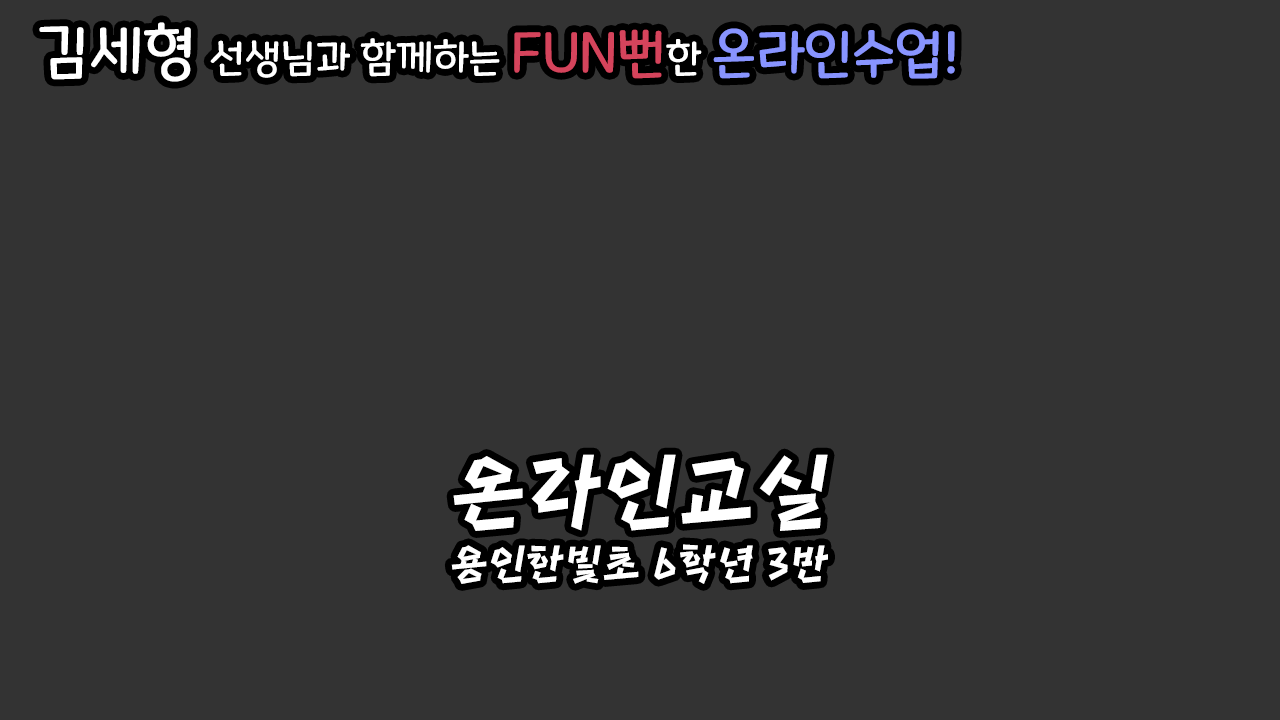
<style>
.page{position:relative;width:1280px;height:720px;background:#333333}
.page>*{position:absolute;margin:0}
.t1{font:40px "MaplestoryLight";color:#ffffff}
.t2{font:60px "MaplestoryLight";color:#ffffff}
.t3{font:55px "MaplestoryLight";color:#d5445c}
.t4{font:55px "MaplestoryLight";color:#8894ff}
.t5{font:40px "MapoHongdaeFreedom";color:#ffffff}
.t6{font:80px "MapoHongdaeFreedom";color:#ffffff}
</style>
<div class="page">
<p class="t1" style="left:39px;top:22px;width:916px;height:60px"><span class="t2">김세형 </span>선생님과 함께하는 <span class="t3">FUN뻔</span>한 <span class="t4">온라인수업!</span></p>
<p class="t5" style="left:451px;top:454px;width:377px;height:130px"><span class="t6">온라인교실<br><br></span>용인한빛초 6학년 3반</p>
</div>
